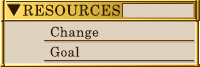
<style>
.page{position:relative;width:200px;height:67px;background:#dfd3c0}
.page>*{position:absolute;margin:0}
.t1{font:14.7px "CenturySchoolbook";letter-spacing:0.025em;color:#321a02}
.t2{font:13.3px "CenturySchoolbook";letter-spacing:0.025em;color:#321a02}
</style>
<div class="page">
<p class="t1" style="left:23px;top:4px;width:97px;height:12px">RESOURCES</p>
<p class="t2" style="left:50px;top:26px;width:49px;height:14px">Change</p>
<p class="t2" style="left:50px;top:46px;width:30px;height:11px">Goal</p>
</div>
